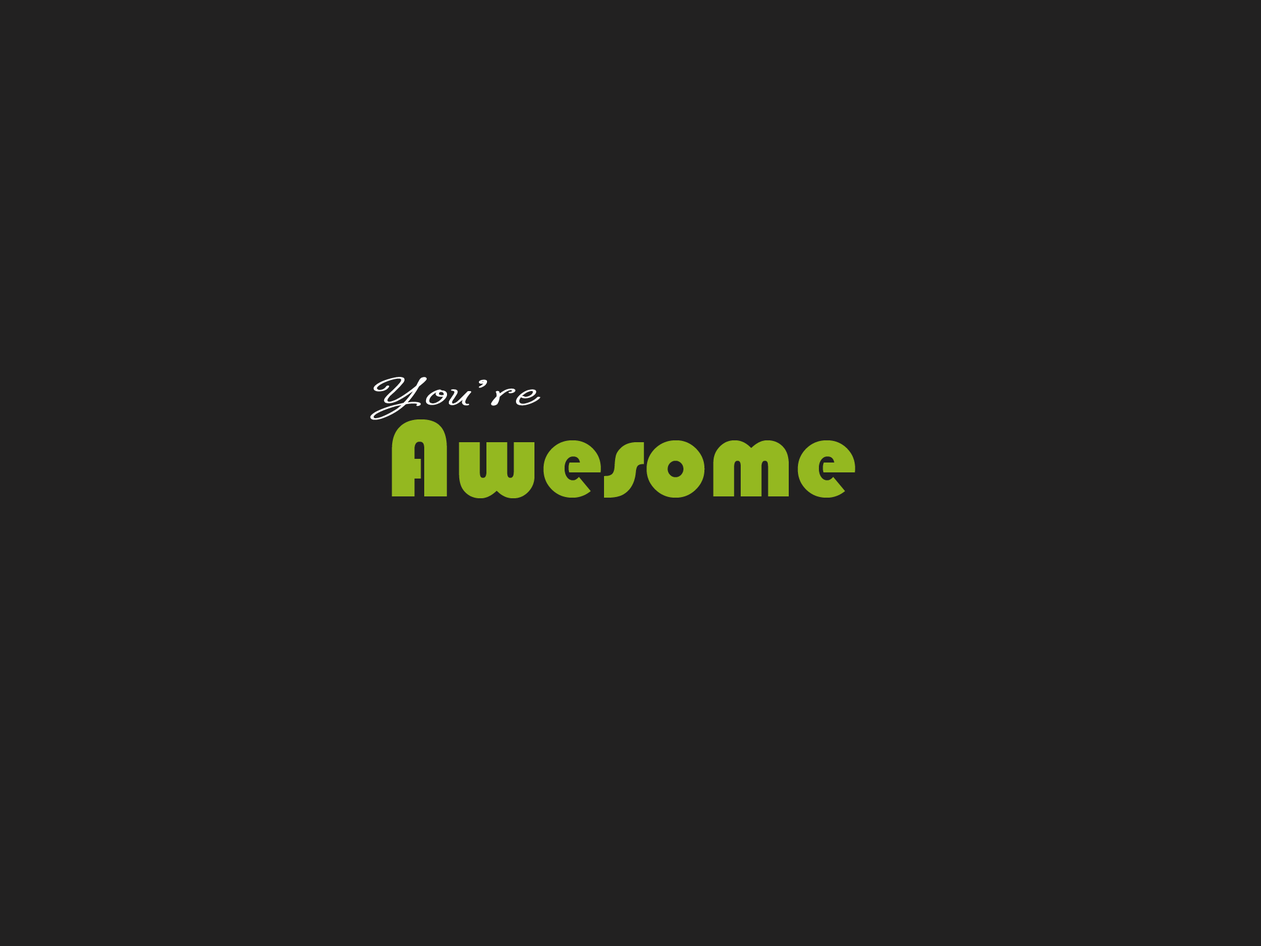
<style>
.page{position:relative;width:1261px;height:946px;background:#222121}
.page>*{position:absolute;margin:0}
.t1{font:67.7px "Bdebonitaregular";color:#ffffff}
.t2{font:112.9px "Bauhaus93";color:#94b820}
</style>
<div class="page">
<p class="t1" style="left:370px;top:377px;width:171px;height:43px">You’re</p>
<p class="t2" style="left:392px;top:419px;width:463px;height:79px">Awesome</p>
</div>
